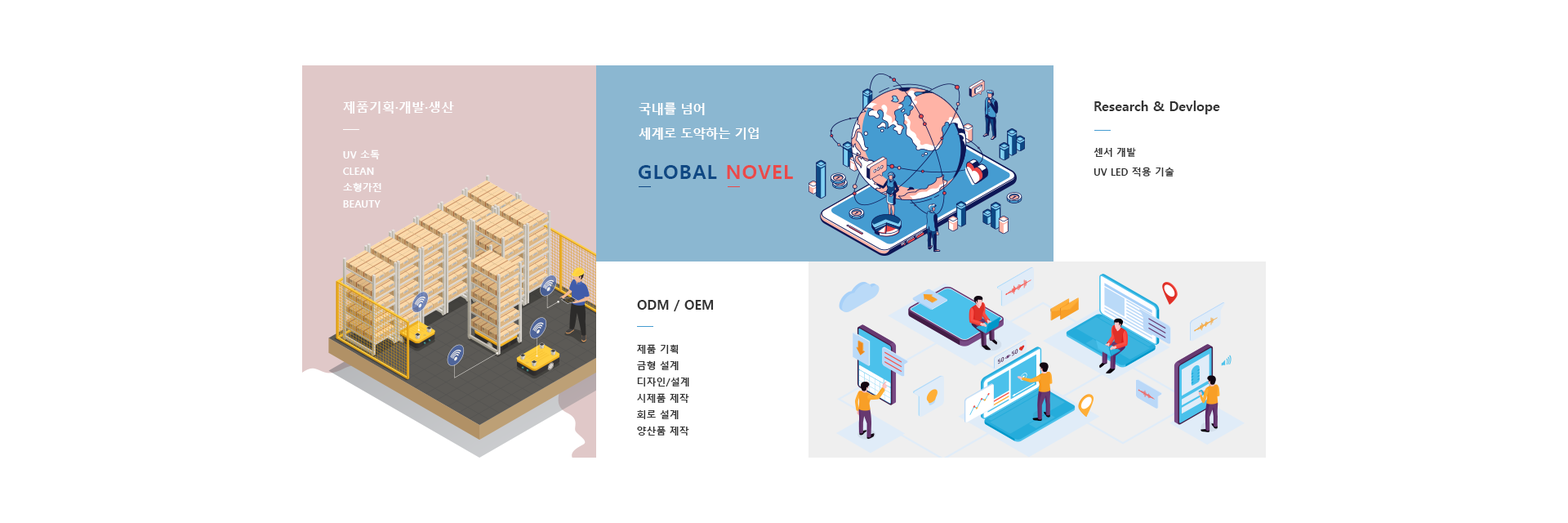
<style>
.page{position:relative;width:1568px;height:523px;background:#ffffff}
.page>*{position:absolute;margin:0}
.t1{font:13.1px "MalgunGothicBold";color:#fefeff}
.t2{font:13.1px "MalgunGothicBold";color:#333333}
.t3{font:13.1px/24.5px "MalgunGothicBold";letter-spacing:-0.04em;color:#ffffff}
.t4{font:9.8px/16.3px "MalgunGothicBold";color:#fefeff}
.t5{font:9.8px/19.6px "MalgunGothicBold";color:#333333}
.t6{font:19.6px "MalgunGothicBold";letter-spacing:0.04em;color:#0f4883}
.t7{font:19.6px "MalgunGothicBold";letter-spacing:0.04em;color:#ea4949}
.t8{font:9.8px/16.3px "MalgunGothicBold";color:#333333}
</style>
<div class="page">
<p class="t1" style="left:343px;top:101px;width:111px;height:13px">제품기획·개발·생산</p>
<p class="t2" style="left:1094px;top:100px;width:126px;height:14px">Research &amp; Devlope</p>
<p class="t3" style="left:639px;top:102px;width:120px;height:38px">국내를 넘어<br>세계로 도약하는 기업</p>
<p class="t4" style="left:343px;top:149px;width:38px;height:58px">UV 소독<br>CLEAN<br>소형가전<br>BEAUTY</p>
<p class="t5" style="left:1094px;top:147px;width:80px;height:29px">센서 개발<br>UV LED 적용 기술</p>
<p class="t6" style="left:639px;top:165px;width:154px;height:14px">GLOBAL <span class="t7">NOVEL</span></p>
<p class="t2" style="left:637px;top:300px;width:77px;height:11px">ODM / OEM</p>
<p class="t8" style="left:636px;top:344px;width:53px;height:91px">제품 기획<br>금형 설계<br>디자인/설계<br>시제품 제작<br>회로 설계<br>양산품 제작</p>
</div>
